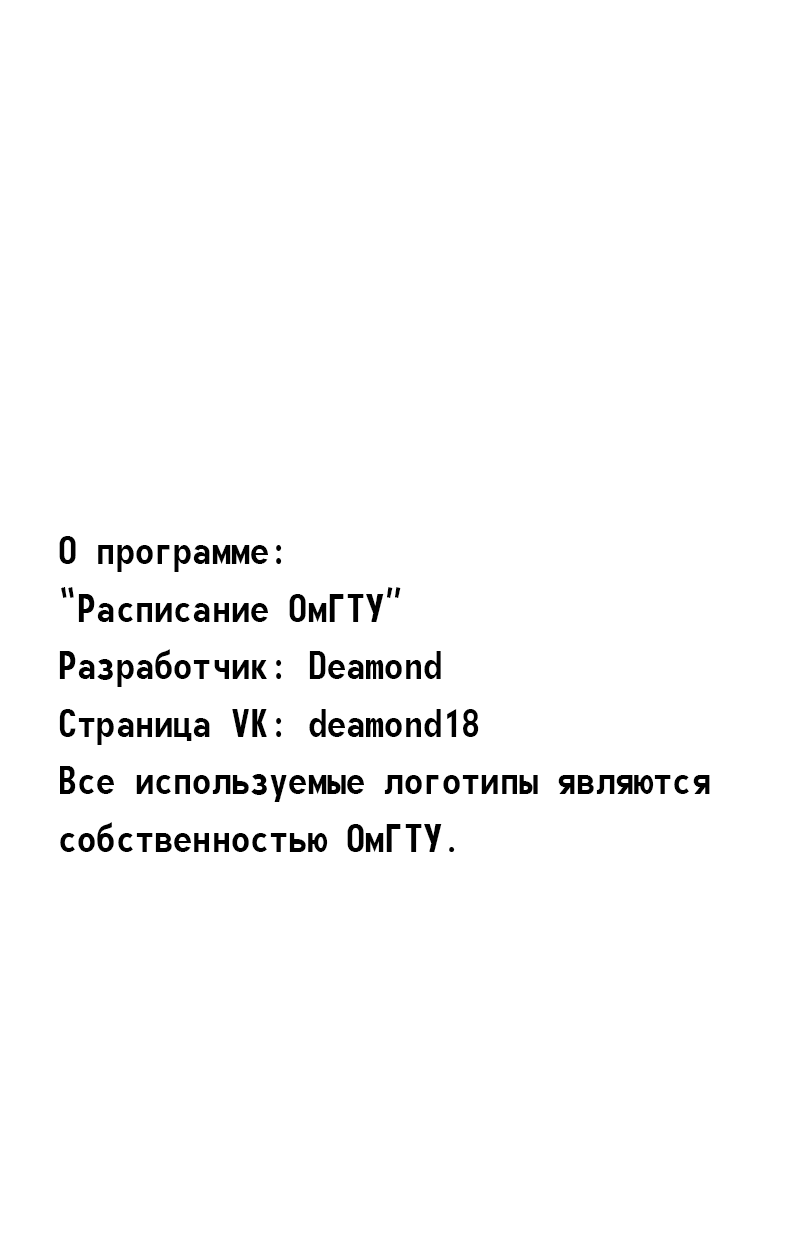
<style>
.page{position:relative;width:800px;height:1250px;background:#ffffff}
.page>*{position:absolute;margin:0}
.t1{font:48px "Monofonto";color:#000000}
</style>
<div class="page">
<p class="t1" style="left:59px;top:536px;width:651px;height:316px">О программе:<br>«Расписание ОмГТУ»<br>Разработчик: Deamond<br>Страница VK: deamond18<br>Все используемые логотипы являются<br>собственностью ОмГТУ.</p>
</div>
